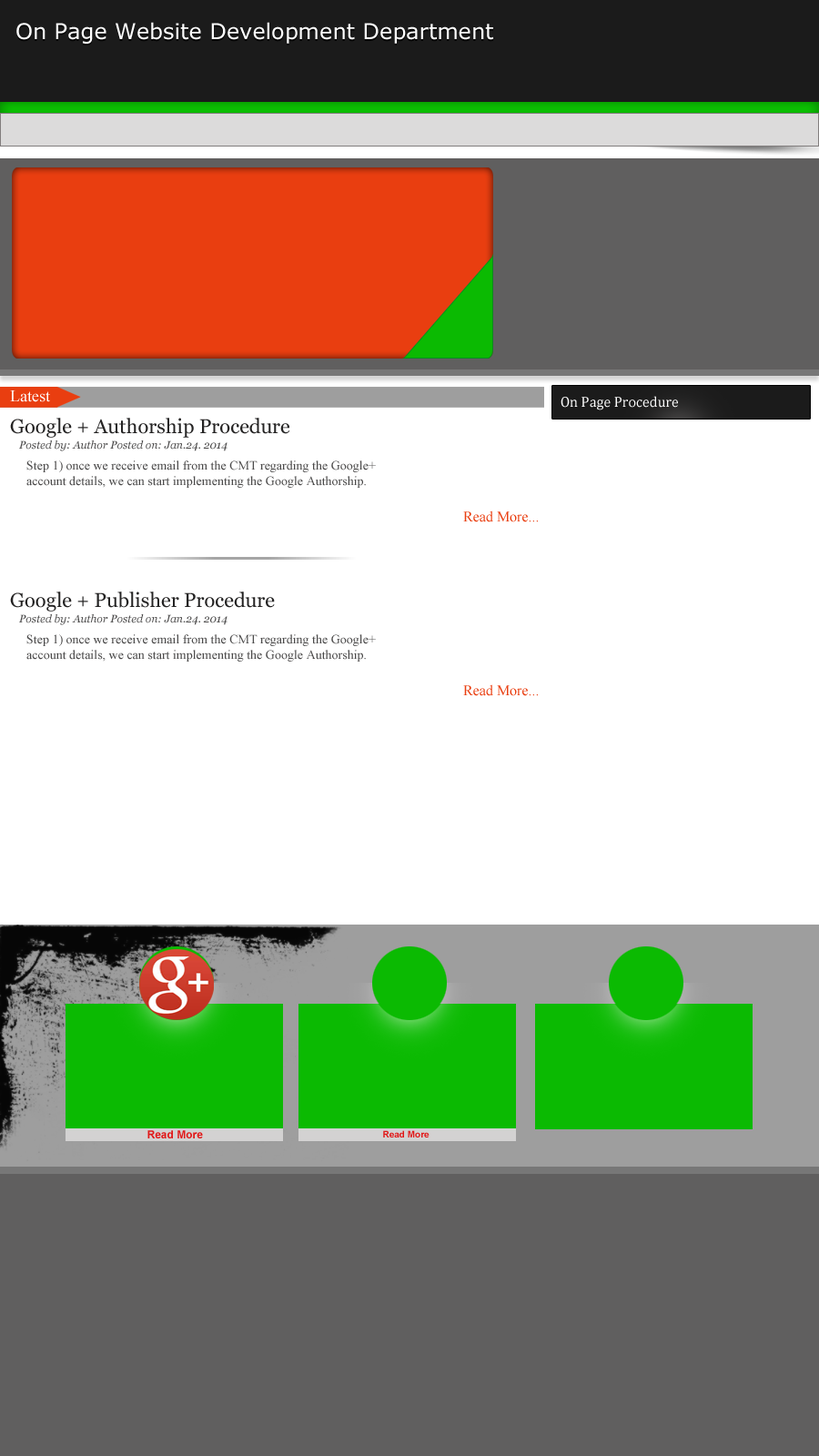
<style>
.page{position:relative;width:819px;height:1456px;background:#ffffff}
.page>*{position:absolute;margin:0}
.t1{font:16.4px "TimesNewRomanPSMT";color:#ffffff}
.t2{font:14.6px "Cambria";color:#ffffff}
.t3{font:20px "Georgia";color:#242323}
.t4{font:10.9px "Georgia-Italic";color:#4b4a4a}
.t5{font:12.7px "TimesNewRomanPSMT";color:#4b4a4a}
.t6{font:14.6px "TimesNewRomanPSMT";color:#e93e10}
.t7{font:10.9px "Arial-BoldMT";color:#e11818}
.t8{font:9.1px "Arial-BoldMT";color:#e11818}
</style>
<div class="page">
<p class="t1" style="left:10px;top:390px;width:40px;height:12px">Latest</p>
<p class="t2" style="left:561px;top:396px;width:117px;height:14px">On Page Procedure</p>
<p class="t3" style="left:10px;top:418px;width:280px;height:20px">Google + Authorship Procedure</p>
<p class="t4" style="left:19px;top:440px;width:208px;height:11px">Posted by: Author Posted on: Jan.24. 2014</p>
<p class="t5" style="left:26px;top:460px;width:350px;height:28px">Step 1) once we receive email from the CMT regarding the Google+ <br>account details, we can start implementing the Google Authorship.</p>
<p class="t6" style="left:463px;top:511px;width:75px;height:11px">Read More...</p>
<p class="t3" style="left:10px;top:591px;width:265px;height:21px">Google + Publisher Procedure</p>
<p class="t4" style="left:19px;top:614px;width:208px;height:11px">Posted by: Author Posted on: Jan.24. 2014</p>
<p class="t5" style="left:26px;top:634px;width:350px;height:28px">Step 1) once we receive email from the CMT regarding the Google+ <br>account details, we can start implementing the Google Authorship.</p>
<p class="t6" style="left:463px;top:684px;width:75px;height:12px">Read More...</p>
<p class="t7" style="left:147px;top:1130px;width:56px;height:8px">Read More</p>
<p class="t7" style="left:147px;top:1130px;width:56px;height:8px">Read More</p>
<p class="t8" style="left:383px;top:1130px;width:47px;height:7px">Read More</p>
<p class="t8" style="left:383px;top:1130px;width:47px;height:7px">Read More</p>
</div>
